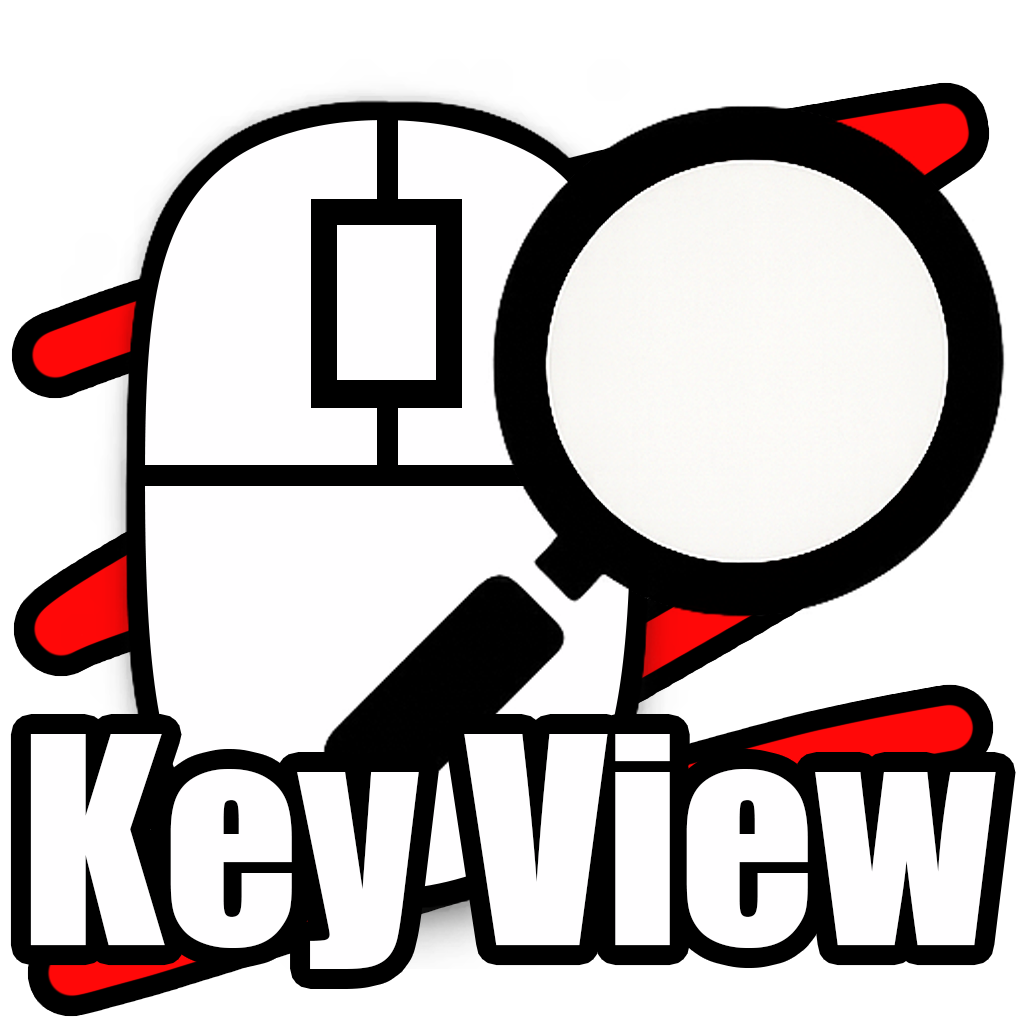
<style>
.page{position:relative;width:1024px;height:1024px;background:#fffeff}
.page>*{position:absolute;margin:0}
.t1{font:267px "Impact";color:#fffeff}
</style>
<div class="page">
<p class="t1" style="left:30px;top:734px;width:966px;height:235px">Key View</p>
</div>
